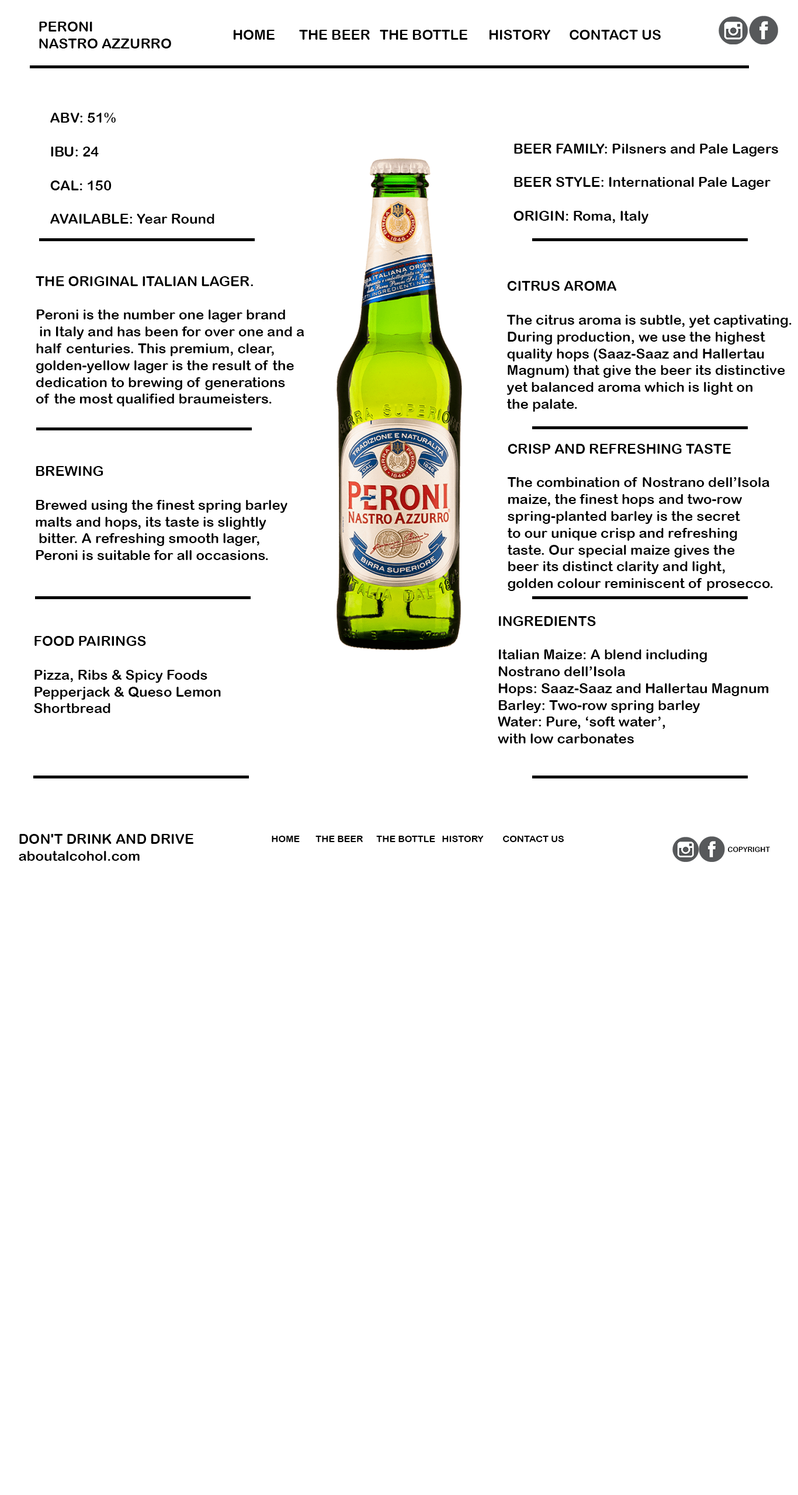
<style>
.page{position:relative;width:798px;height:1495px;background:#ffffff}
.page>*{position:absolute;margin:0}
.t1{font:14px "ArialRoundedMTBold";color:#000000}
.t2{font:9.3px "ArialRoundedMTBold";color:#000000}
.t3{font:7px "ArialRoundedMTBold";color:#000000}
</style>
<div class="page">
<p class="t1" style="left:39px;top:22px;width:132px;height:26px">PERONI<br>NASTRO AZZURRO</p>
<p class="t1" style="left:233px;top:30px;width:427px;height:10px">HOME  THE BEER  THE BOTTLE  HISTORY  CONTACT US</p>
<p class="t1" style="left:50px;top:113px;width:164px;height:111px">ABV: 51%<br><br>IBU: 24<br><br>CAL: 150<br><br>AVAILABLE: Year Round</p>
<p class="t1" style="left:513px;top:144px;width:265px;height:80px">BEER FAMILY: Pilsners and Pale Lagers<br><br>BEER STYLE: International Pale Lager<br><br>ORIGIN: Roma, Italy</p>
<p class="t1" style="left:36px;top:276px;width:268px;height:130px">THE ORIGINAL ITALIAN LAGER.<br><br>Peroni is the number one lager brand<br> in Italy and has been for over one and a <br>half centuries. This premium, clear, <br>golden-yellow lager is the result of the <br>dedication to brewing of generations <br>of the most qualified braumeisters.</p>
<p class="t1" style="left:506px;top:281px;width:285px;height:131px">CITRUS AROMA<br><br>The citrus aroma is subtle, yet captivating.<br>During production, we use the highest <br>quality hops (Saaz-Saaz and Hallertau <br>Magnum) that give the beer its distinctive<br>yet balanced aroma which is light on <br>the palate.</p>
<p class="t1" style="left:507px;top:444px;width:266px;height:147px">CRISP AND REFRESHING TASTE<br><br>The combination of Nostrano dell’Isola <br>maize, the finest hops and two-row <br>spring-planted barley is the secret <br>to our unique crisp and refreshing <br>taste. Our special maize gives the <br>beer its distinct clarity and light, <br>golden colour reminiscent of prosecco.</p>
<p class="t1" style="left:36px;top:466px;width:251px;height:94px">BREWING<br><br>Brewed using the finest spring barley <br>malts and hops, its taste is slightly<br> bitter. A refreshing smooth lager, <br>Peroni is suitable for all occasions.</p>
<p class="t1" style="left:498px;top:616px;width:270px;height:127px">INGREDIENTS<br><br>Italian Maize: A blend including <br>Nostrano dell’Isola<br>Hops: Saaz-Saaz and Hallertau Magnum<br>Barley: Two-row spring barley<br>Water: Pure, ‘soft water’, <br>with low carbonates</p>
<p class="t1" style="left:34px;top:636px;width:187px;height:77px">FOOD PAIRINGS<br><br>Pizza, Ribs &amp; Spicy Foods<br>Pepperjack &amp; Queso Lemon <br>Shortbread</p>
<p class="t1" style="left:19px;top:834px;width:175px;height:27px">DON'T DRINK AND DRIVE<br>aboutalcohol.com</p>
<p class="t2" style="left:272px;top:836px;width:292px;height:6px">HOME  THE BEER  THE BOTTLE  HISTORY  CONTACT US</p>
<p class="t3" style="left:728px;top:847px;width:42px;height:5px">COPYRIGHT</p>
</div>
